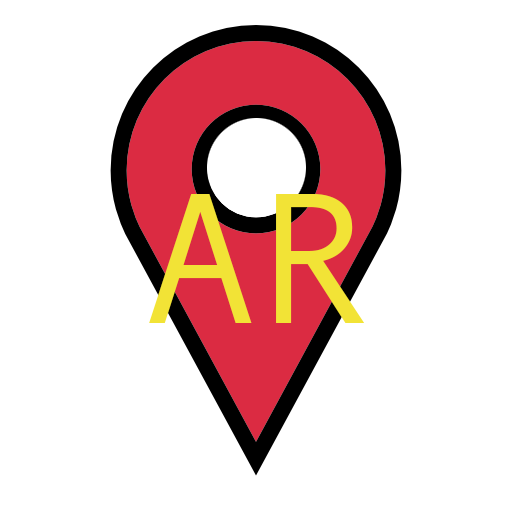
<style>
.page{position:relative;width:512px;height:512px;background:#ffffff}
.page>*{position:absolute;margin:0}
.t1{font:187.5px "AndaleMono";color:#f2e336}
</style>
<div class="page">
<p class="t1" style="left:149px;top:194px;width:216px;height:129px">AR</p>
</div>
